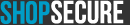
<style>
.page{position:relative;width:130px;height:25px;background:#333333}
.page>*{position:absolute;margin:0}
.t1{font:32px "UTM-Bebas";color:#009dc7}
.t2{font:32px "UTM-Bebas";color:#ffffff}
</style>
<div class="page">
<p class="t1" style="left:0px;top:1px;width:50px;height:23px">shop</p>
<p class="t2" style="left:51px;top:0px;width:73px;height:24px">secure</p>
</div>
